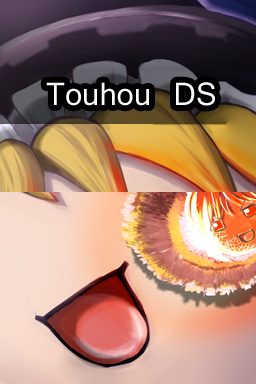
<style>
.page{position:relative;width:256px;height:384px}
.page>*{position:absolute;margin:0}
.t1{font:30px "Kartika";color:#ffffff}
</style>
<div class="page">
<p class="t1" style="left:46px;top:82px;width:169px;height:24px">Touhou DS</p>
</div>
